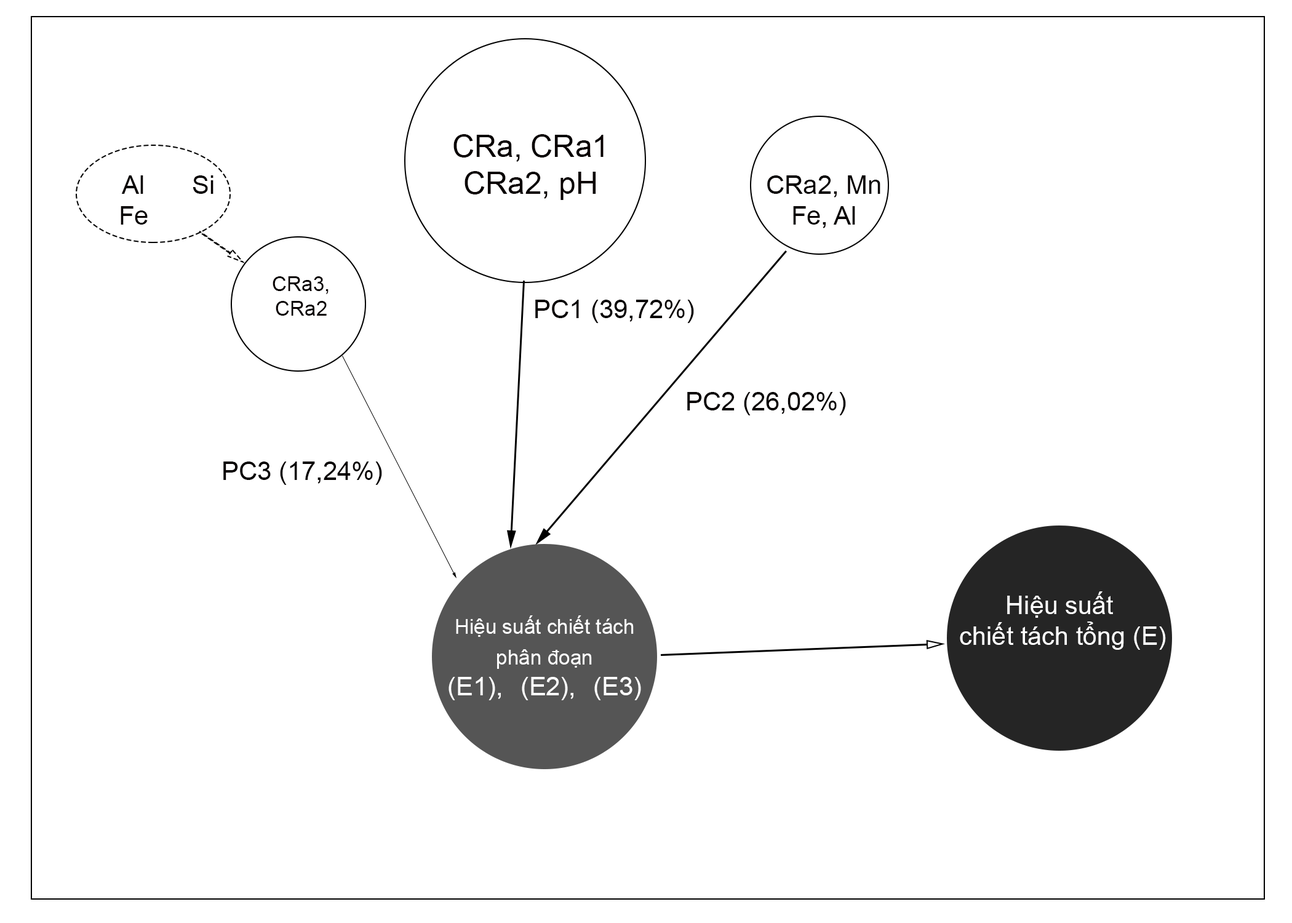
<style>
.page{position:relative;width:1292px;height:923px;background:#ffffff}
.page>*{position:absolute;margin:0}
.t1{font:30.8px "ArialMT";color:#080101}
.t2{font:25.6px "ArialMT";color:#060202}
.t3{font:20.5px "ArialMT";color:#070000}
.t4{font:25.5px "ArialMT";color:#ffffff}
.t5{font:20.5px "ArialMT";color:#ffffff}
.t6{font:25.6px "ArialMT";color:#ffffff}
</style>
<div class="page">
<p class="t1" style="left:453px;top:134px;width:151px;height:66px;text-align:center">CRa, CRa1 CRa2, pH</p>
<p class="t2" style="left:121px;top:175px;width:27px;height:50px;text-align:center">Al<br>Fe</p>
<p class="t2" style="left:193px;top:175px;width:20px;height:19px">Si</p>
<p class="t2" style="left:767px;top:175px;width:113px;height:53px;text-align:center">CRa2, Mn<br>Fe, Al</p>
<p class="t3" style="left:273px;top:276px;width:56px;height:40px;text-align:center">CRa3, <br>CRa2</p>
<p class="t2" style="left:535px;top:300px;width:159px;height:23px">PC1 (39,72%)</p>
<p class="t2" style="left:687px;top:392px;width:159px;height:23px">PC2 (26,02%)</p>
<p class="t2" style="left:223px;top:461px;width:159px;height:24px">PC3 (17,24%)</p>
<p class="t4" style="left:960px;top:591px;width:206px;height:59px;text-align:justify">Hiệu suất<br> chiết tách tổng (E)</p>
<p class="t5" style="left:449px;top:615px;width:192px;height:85px;text-align:center">Hiệu suất chiết tách phân đoạn<span class="t6"> <br>(E1), (E2), (E3)</span></p>
</div>
